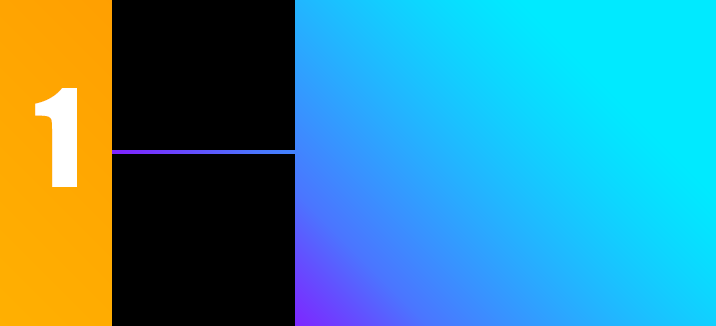
<style>
.page{position:relative;width:716px;height:326px;background:#000000}
.page>*{position:absolute;margin:0}
.t1{font:125px "Impact";color:#ffffff}
</style>
<div class="page">
<p class="t1" style="left:35px;top:88px;width:42px;height:99px">1</p>
</div>
